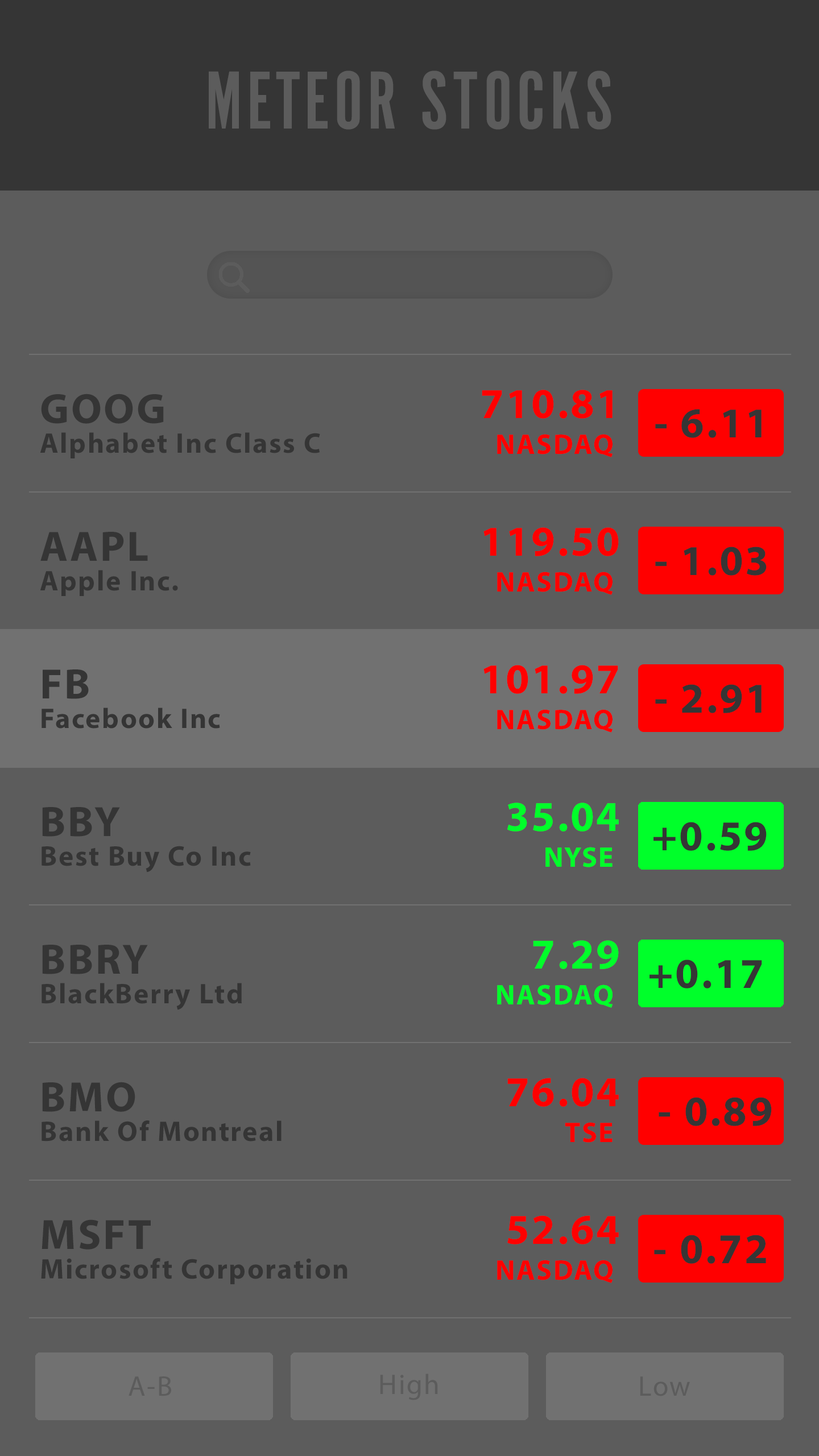
<style>
.page{position:relative;width:819px;height:1456px;background:#5c5c5c}
.page>*{position:absolute;margin:0}
.t1{font:85.3px "AlternateGotNo1D";letter-spacing:0.05em;color:#5c5c5c}
.t2{font:42.7px "MyriadPro-Bold";letter-spacing:0.05em;color:#ff0000}
.t3{font:42.7px "MyriadPro-Bold";letter-spacing:0.05em;color:#353535}
.t4{font:28.4px "MyriadPro-Bold";letter-spacing:0.05em;color:#353535}
.t5{font:28.4px "MyriadPro-Bold";letter-spacing:0.05em;color:#ff0000}
.t6{font:42.7px "MyriadPro-Bold";letter-spacing:0.05em;color:#00ff2a}
.t7{font:28.4px "MyriadPro-Bold";letter-spacing:0.05em;color:#00ff2a}
.t8{font:28.4px "MyriadPro-Regular";letter-spacing:0.05em;color:#5c5c5c}
</style>
<div class="page">
<p class="t1" style="left:209px;top:71px;width:402px;height:59px">METEOR STOCKS</p>
<p class="t2" style="left:482px;top:390px;width:131px;height:29px">710.81</p>
<p class="t3" style="left:41px;top:394px;width:123px;height:30px">GOOG</p>
<p class="t3" style="left:655px;top:409px;width:107px;height:29px">- 6.11</p>
<p class="t4" style="left:40px;top:432px;width:280px;height:26px">Alphabet Inc Class C</p>
<p class="t5" style="left:497px;top:434px;width:116px;height:23px">NASDAQ</p>
<p class="t3" style="left:40px;top:532px;width:108px;height:29px">AAPL</p>
<p class="t2" style="left:483px;top:527px;width:136px;height:29px">119.50</p>
<p class="t3" style="left:655px;top:547px;width:112px;height:29px">- 1.03</p>
<p class="t4" style="left:40px;top:570px;width:138px;height:26px">Apple Inc.</p>
<p class="t5" style="left:497px;top:572px;width:116px;height:23px">NASDAQ</p>
<p class="t2" style="left:483px;top:665px;width:135px;height:29px">101.97</p>
<p class="t3" style="left:43px;top:669px;width:46px;height:30px">FB</p>
<p class="t3" style="left:655px;top:684px;width:107px;height:29px">- 2.91</p>
<p class="t4" style="left:42px;top:708px;width:178px;height:21px">Facebook Inc</p>
<p class="t5" style="left:497px;top:709px;width:116px;height:24px">NASDAQ</p>
<p class="t3" style="left:42px;top:807px;width:78px;height:30px">BBY</p>
<p class="t6" style="left:507px;top:802px;width:112px;height:30px">35.04</p>
<p class="t3" style="left:653px;top:822px;width:114px;height:29px">+0.59</p>
<p class="t4" style="left:42px;top:846px;width:209px;height:26px">Best Buy Co Inc</p>
<p class="t7" style="left:545px;top:847px;width:68px;height:20px">NYSE</p>
<p class="t6" style="left:533px;top:940px;width:86px;height:29px">7.29</p>
<p class="t3" style="left:42px;top:945px;width:106px;height:29px">BBRY</p>
<p class="t3" style="left:650px;top:959px;width:112px;height:29px">+0.17</p>
<p class="t4" style="left:42px;top:983px;width:200px;height:27px">BlackBerry Ltd</p>
<p class="t7" style="left:497px;top:984px;width:116px;height:24px">NASDAQ</p>
<p class="t3" style="left:42px;top:1082px;width:93px;height:30px">BMO</p>
<p class="t2" style="left:507px;top:1078px;width:112px;height:29px">76.04</p>
<p class="t3" style="left:659px;top:1097px;width:113px;height:29px">- 0.89</p>
<p class="t4" style="left:42px;top:1120px;width:240px;height:21px">Bank Of Montreal</p>
<p class="t5" style="left:565px;top:1122px;width:48px;height:21px">TSE</p>
<p class="t2" style="left:507px;top:1215px;width:112px;height:29px">52.64</p>
<p class="t3" style="left:42px;top:1219px;width:109px;height:31px">MSFT</p>
<p class="t3" style="left:654px;top:1235px;width:112px;height:29px">- 0.72</p>
<p class="t4" style="left:41px;top:1258px;width:307px;height:26px">Microsoft Corporation</p>
<p class="t5" style="left:497px;top:1260px;width:116px;height:23px">NASDAQ</p>
<p class="t8" style="left:380px;top:1374px;width:58px;height:26px">High</p>
<p class="t8" style="left:129px;top:1376px;width:42px;height:20px">A-B</p>
<p class="t8" style="left:640px;top:1376px;width:50px;height:20px">Low</p>
</div>
